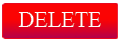
<style>
.page{position:relative;width:120px;height:42px;background:#ffffff}
.page>*{position:absolute;margin:0}
.t1{font:22px "TimesNewRomanPSMT";color:#ffffff}
</style>
<div class="page">
<p class="t1" style="left:18px;top:12px;width:83px;height:15px">DELETE</p>
</div>
